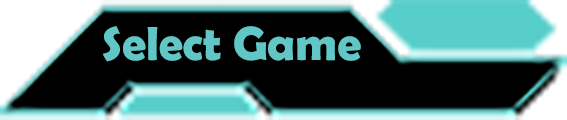
<style>
.page{position:relative;width:567px;height:120px;background:#000000}
.page>*{position:absolute;margin:0}
.t1{font:48px "BerlinSansFBDemi-Bold";color:#61c6c5}
</style>
<div class="page">
<p class="t1" style="left:103px;top:26px;width:258px;height:36px">Select Game</p>
</div>
